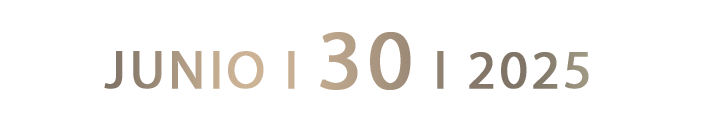
<style>
.page{position:relative;width:720px;height:120px;background:#ffffff}
.page>*{position:absolute;margin:0}
.t1{font:54.5px "MyriadPro-Regular";letter-spacing:0.05em;text-transform:uppercase;font-weight:bold}
.t2{font:85.3px "MyriadPro-Regular";letter-spacing:0.05em;text-transform:uppercase;font-weight:bold}
</style>
<div class="page">
<p class="t1" style="left:104px;top:32px;width:485px;height:58px">JUNIO I <span class="t2">30</span> I 2025</p>
</div>
